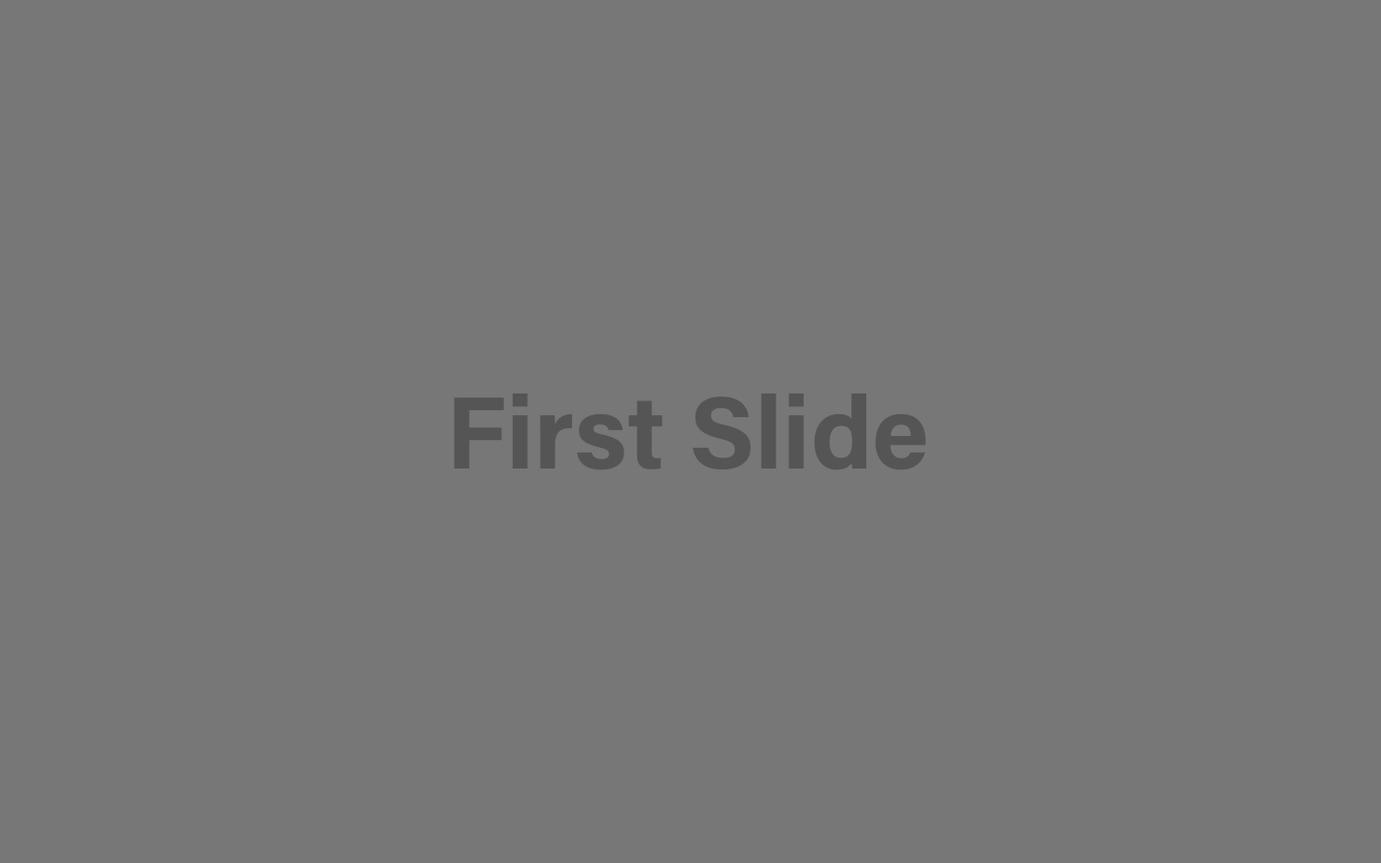
<style>
.page{position:relative;width:1381px;height:863px;background:#777777}
.page>*{position:absolute;margin:0}
.t1{font:102.8px "AcuminConcept-Bold";color:#555555}
</style>
<div class="page">
<p class="t1" style="left:454px;top:393px;width:472px;height:78px">First Slide</p>
</div>
